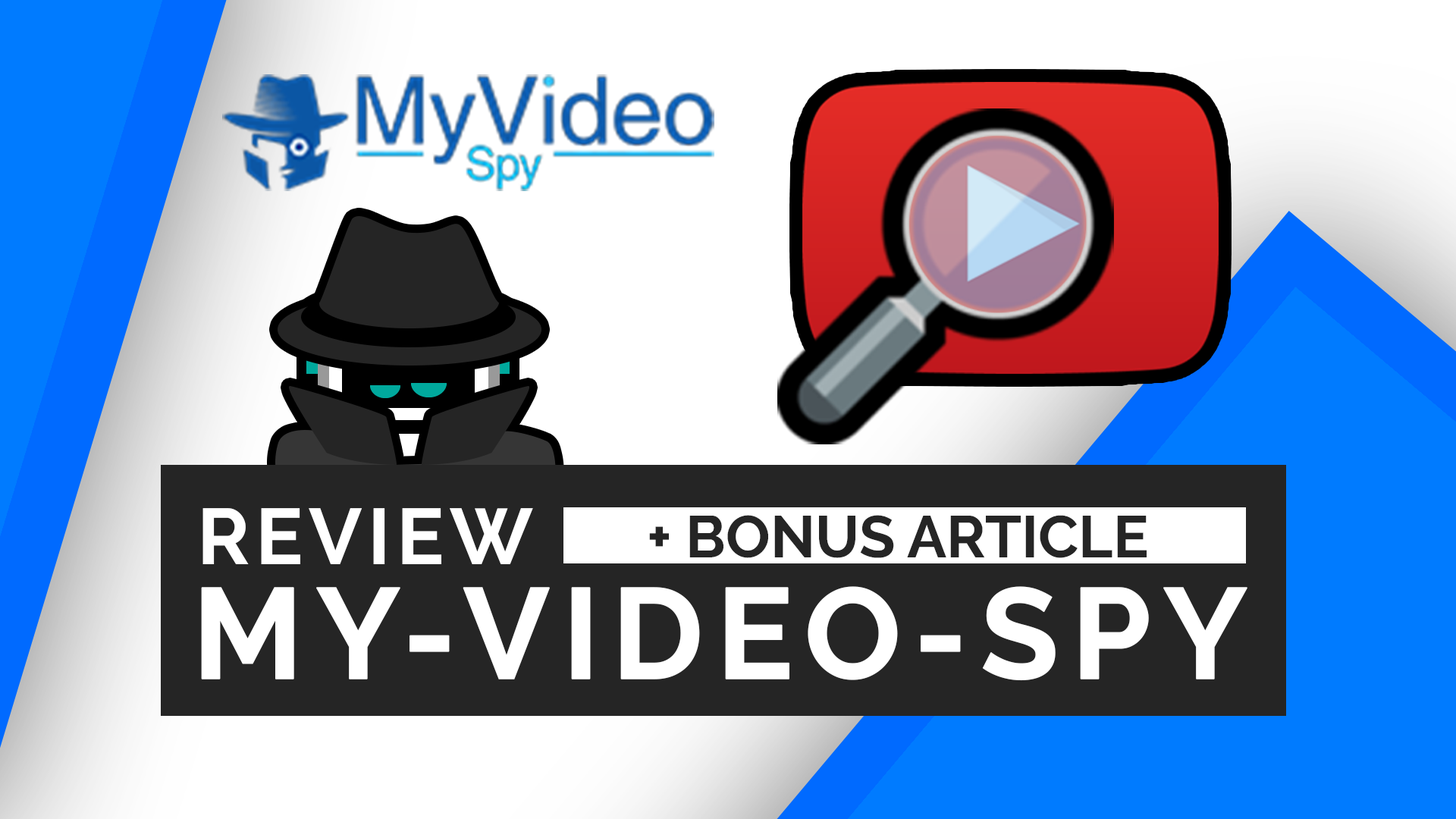
<style>
.page{position:relative;width:1456px;height:819px;background:#ffffff}
.page>*{position:absolute;margin:0}
.t1{font:78.9px "Raleway-Bold";letter-spacing:0.075em;color:#ffffff;text-transform:uppercase}
.t2{font:58.9px "Raleway-Bold";color:#252525;text-transform:uppercase}
.t3{font:128px "Raleway-Bold";letter-spacing:0.075em;color:#ffffff;text-transform:uppercase;font-weight:bold}
</style>
<div class="page">
<p class="t1" style="left:202px;top:508px;width:331px;height:56px">Review</p>
<p class="t2" style="left:649px;top:515px;width:498px;height:43px">+ Bonus article</p>
<p class="t3" style="left:201px;top:586px;width:1046px;height:95px">My-Video-Spy</p>
</div>
